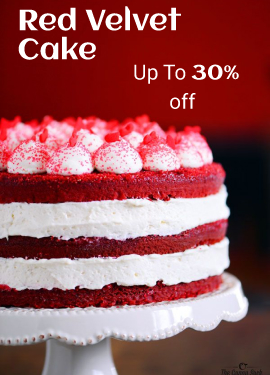
<style>
.page{position:relative;width:270px;height:375px}
.page>*{position:absolute;margin:0}
.t1{font:29.2px/29.2px "Aclonica-Regular";color:#ffffff}
.t2{font:20.8px/29.2px "Roboto-Regular";color:#ffffff}
.t3{font:20.8px/29.2px "Aclonica-Regular";color:#ffffff}
</style>
<div class="page">
<p class="t1" style="left:18px;top:6px;width:163px;height:54px">Red Velvet <br>Cake</p>
<p class="t2" style="left:134px;top:64px;width:105px;height:45px">Up To <span class="t3">30%<br></span>       off</p>
</div>
